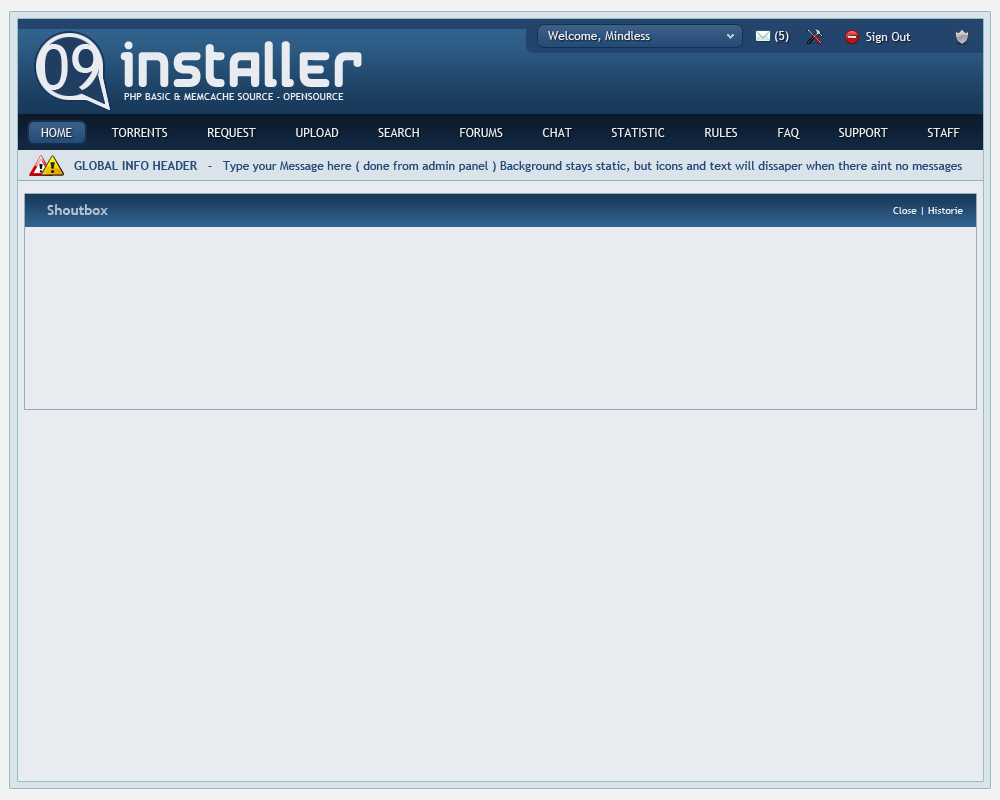
<style>
.page{position:relative;width:1000px;height:800px;background:#e8ecf1}
.page>*{position:absolute;margin:0}
.t1{font:55px "AirstripFour";color:#e8ecf1}
.t2{font:12px "TrebuchetMS";color:#e8ecf1}
.t3{font:10.2px "TrebuchetMS";color:#e8ecf1}
.t4{font:12px "TrebuchetMS";color:#254c78}
.t5{font:12px "TrebuchetMS-Bold";color:#254c78}
.t6{font:14px "TrebuchetMS-Bold";color:#b3c1d0}
.t7{font:10px "TrebuchetMS";color:#e8ecf1}
</style>
<div class="page">
<p class="t1" style="left:120px;top:41px;width:242px;height:46px">INSTALLER</p>
<p class="t2" style="left:548px;top:31px;width:102px;height:11px">Welcome, Mindless</p>
<p class="t2" style="left:775px;top:31px;width:14px;height:11px">(5)</p>
<p class="t2" style="left:866px;top:32px;width:45px;height:11px">Sign Out</p>
<p class="t3" style="left:124px;top:93px;width:220px;height:7px">PHP BASIC &amp; MEMCACHE SOURCE - OPENSOURCE</p>
<p class="t2" style="left:41px;top:128px;width:919px;height:11px">HOME           TORRENTS           REQUEST           UPLOAD           SEARCH           FORUMS           CHAT           STATISTIC           RULES           FAQ           SUPPORT           STAFF</p>
<p class="t4" style="left:74px;top:161px;width:888px;height:11px"><span class="t5">GLOBAL INFO HEADER   -   </span>Type your Message here ( done from admin panel ) Background stays static, but icons and text will dissaper when there aint no messages</p>
<p class="t6" style="left:47px;top:204px;width:61px;height:11px">Shoutbox</p>
<p class="t7" style="left:893px;top:207px;width:70px;height:8px">Close | Historie</p>
</div>
